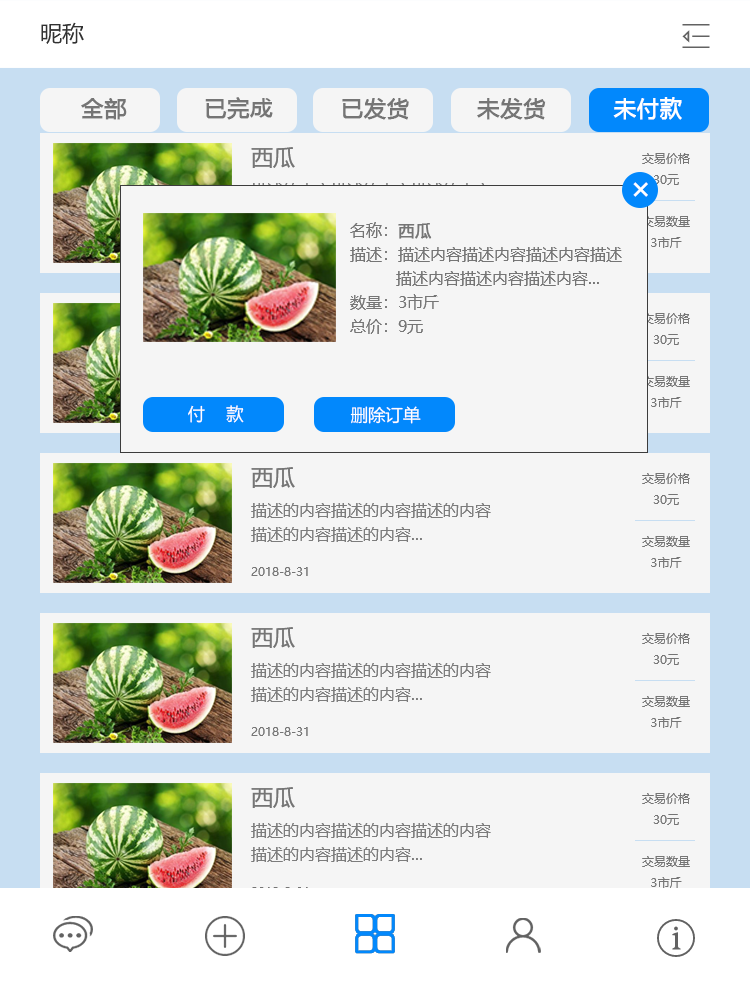
<style>
.page{position:relative;width:750px;height:986px;background:#f5f5f5}
.page>*{position:absolute;margin:0}
.t1{font:22px "MicrosoftYaHei";color:#323232;text-transform:uppercase}
.t2{font:22px "MicrosoftYaHei";color:#757575;text-transform:uppercase;font-weight:bold}
.t3{font:22px "MicrosoftYaHei";color:#ffffff;text-transform:uppercase;font-weight:bold}
.t4{font:12px "MicrosoftYaHei";color:#757575}
.t5{font:36px "MicrosoftYaHei";color:#ffffff;text-transform:uppercase}
.t6{font:16px/24px "MicrosoftYaHei";color:#757575}
.t7{font:16px/24px "MicrosoftYaHei";color:#757575;font-weight:bold}
.t8{font:17.3px "MicrosoftYaHei";color:#ffffff;text-transform:uppercase}
.t9{font:16px/24px "MicrosoftYaHei";color:#7c7c7c}
.t10{font:22px/36px "MicrosoftYaHei";color:#757575}
</style>
<div class="page">
<p class="t1" style="left:41px;top:22px;width:43px;height:22px">昵称</p>
<p class="t2" style="left:81px;top:97px;width:601px;height:23px">全部       已完成      已发货     未发货    <span class="t3">未付款</span></p>
<p class="t4" style="left:642px;top:153px;width:48px;height:95px;text-align:center">交易价格<br>30元<br><br>交易数量<br>3市斤</p>
<p class="t5" style="left:633px;top:182px;width:15px;height:15px;rotate:45deg">+</p>
<p class="t6" style="left:350px;top:222px;width:272px;height:112px">名称：<span class="t7">西瓜<br></span>描述：描述内容描述内容描述内容描述<br>   描述内容描述内容描述内容...<br>数量：3市斤<br>总价：9元</p>
<p class="t4" style="left:642px;top:313px;width:48px;height:95px;text-align:center">交易价格<br>30元<br><br>交易数量<br>3市斤</p>
<p class="t8" style="left:188px;top:405px;width:56px;height:18px">付    款</p>
<p class="t8" style="left:350px;top:406px;width:71px;height:18px">删除订单</p>
<p class="t9" style="left:251px;top:467px;width:240px;height:109px"><span class="t10">西瓜<br></span>描述的内容描述的内容描述的内容<br>描述的内容描述的内容...<br><br><span class="t4">2018-8-31</span></p>
<p class="t4" style="left:642px;top:473px;width:48px;height:95px;text-align:center">交易价格<br>30元<br><br>交易数量<br>3市斤</p>
<p class="t9" style="left:251px;top:627px;width:240px;height:109px"><span class="t10">西瓜<br></span>描述的内容描述的内容描述的内容<br>描述的内容描述的内容...<br><br><span class="t4">2018-8-31</span></p>
<p class="t4" style="left:642px;top:633px;width:48px;height:95px;text-align:center">交易价格<br>30元<br><br>交易数量<br>3市斤</p>
<p class="t9" style="left:251px;top:787px;width:240px;height:109px"><span class="t10">西瓜<br></span>描述的内容描述的内容描述的内容<br>描述的内容描述的内容...<br><br><span class="t4">2018-8-31</span></p>
<p class="t4" style="left:642px;top:793px;width:48px;height:95px;text-align:center">交易价格<br>30元<br><br>交易数量<br>3市斤</p>
</div>
